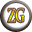
<style>
.page{position:relative;width:32px;height:32px;background:#ffffff}
.page>*{position:absolute;margin:0}
.t1{font:13px "RingbearerMedium"}
</style>
<div class="page">
<p class="t1" style="left:7px;top:8px;width:17px;height:15px">ZG</p>
</div>
